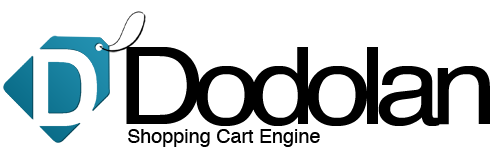
<style>
.page{position:relative;width:500px;height:153px;background:#ffffff}
.page>*{position:absolute;margin:0}
.t1{font:107.2px "Helvetica";letter-spacing:-0.1em;color:#000000;scale:1.14 1}
.t2{font:19.8px "Helvetica";color:#000000}
</style>
<div class="page">
<p class="t1" style="left:126px;top:47px;width:364px;height:79px">Dodolan</p>
<p class="t2" style="left:128px;top:129px;width:192px;height:18px">Shopping Cart Engine</p>
</div>
